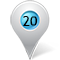
<style>
.page{position:relative;width:60px;height:60px;background:#ffffff}
.page>*{position:absolute;margin:0}
.t1{font:14.1px "TrebuchetMS";color:#000000}
</style>
<div class="page">
<p class="t1" style="left:23px;top:16px;width:14px;height:10px">20</p>
</div>
